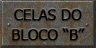
<style>
.page{position:relative;width:96px;height:48px}
.page>*{position:absolute;margin:0}
.t1{font:14.7px/20px "Tahoma";letter-spacing:-0.01em;color:#000000;text-transform:uppercase;font-weight:bold}
</style>
<div class="page">
<p class="t1" style="left:12px;top:9px;width:73px;height:32px;text-align:center">CELAS DO<br>BLOCO “B”</p>
</div>
